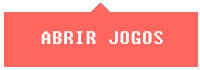
<style>
.page{position:relative;width:200px;height:70px;background:#ff665e}
.page>*{position:absolute;margin:0}
.t1{font:18px "Fixedsys";color:#ffffff}
</style>
<div class="page">
<p class="t1" style="left:41px;top:31px;width:122px;height:13px">ABRIR JOGOS</p>
</div>
